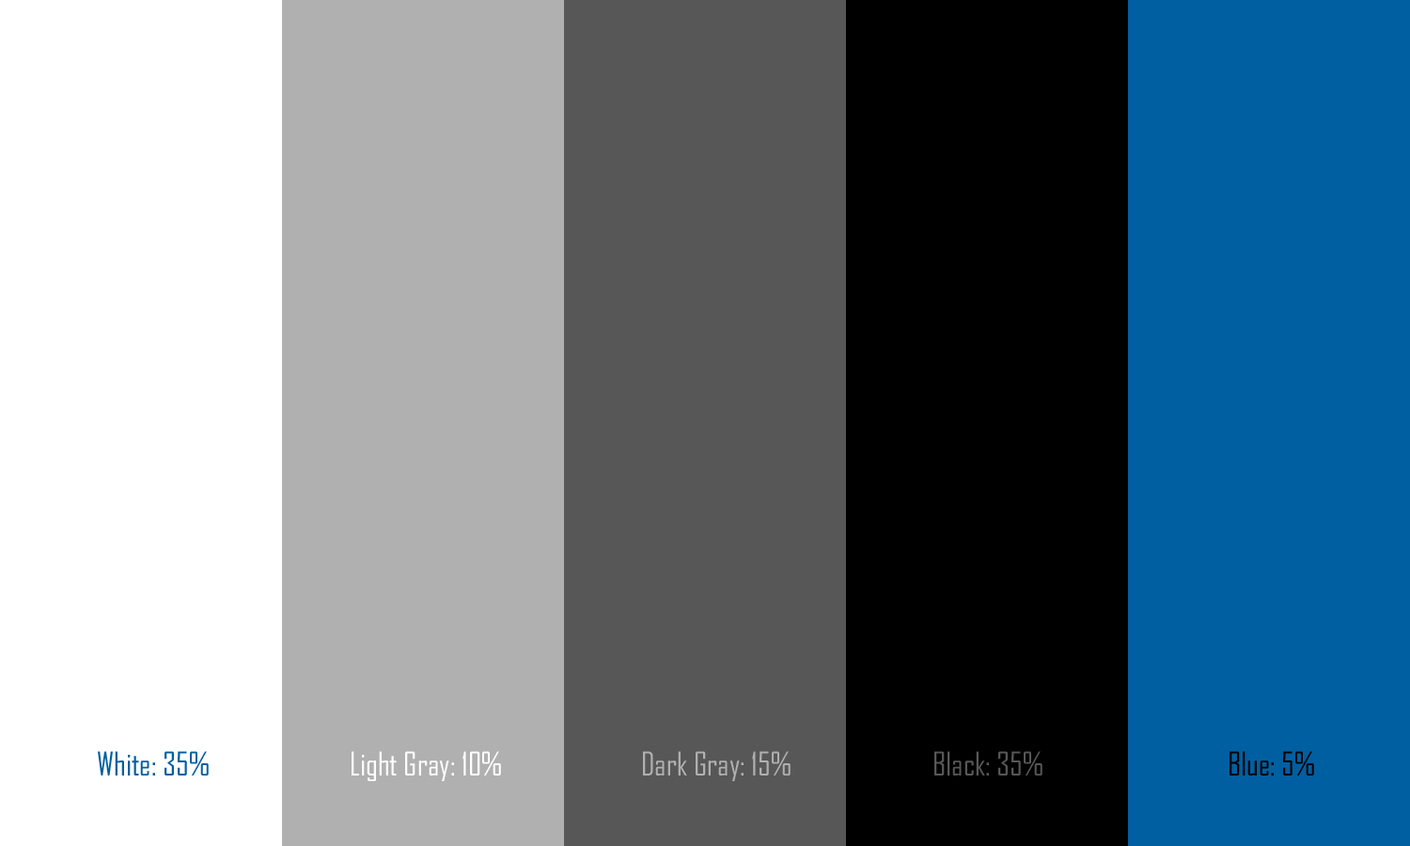
<style>
.page{position:relative;width:1410px;height:846px;background:#ffffff}
.page>*{position:absolute;margin:0}
.t1{font:31.3px "AgencyFB-Reg";color:#005fa1}
.t2{font:31.3px "AgencyFB-Reg";color:#ffffff}
.t3{font:31.3px "AgencyFB-Reg";color:#b0b0b0}
.t4{font:31.3px "AgencyFB-Reg";color:#575757}
.t5{font:31.3px "AgencyFB-Reg";color:#000000}
</style>
<div class="page">
<p class="t1" style="left:98px;top:751px;width:111px;height:24px">White: 35%</p>
<p class="t2" style="left:351px;top:751px;width:150px;height:30px">Light Gray: 10%</p>
<p class="t3" style="left:643px;top:751px;width:147px;height:30px">Dark Gray: 15%</p>
<p class="t4" style="left:934px;top:751px;width:108px;height:24px">Black: 35%</p>
<p class="t5" style="left:1229px;top:751px;width:85px;height:24px">Blue: 5%</p>
</div>
